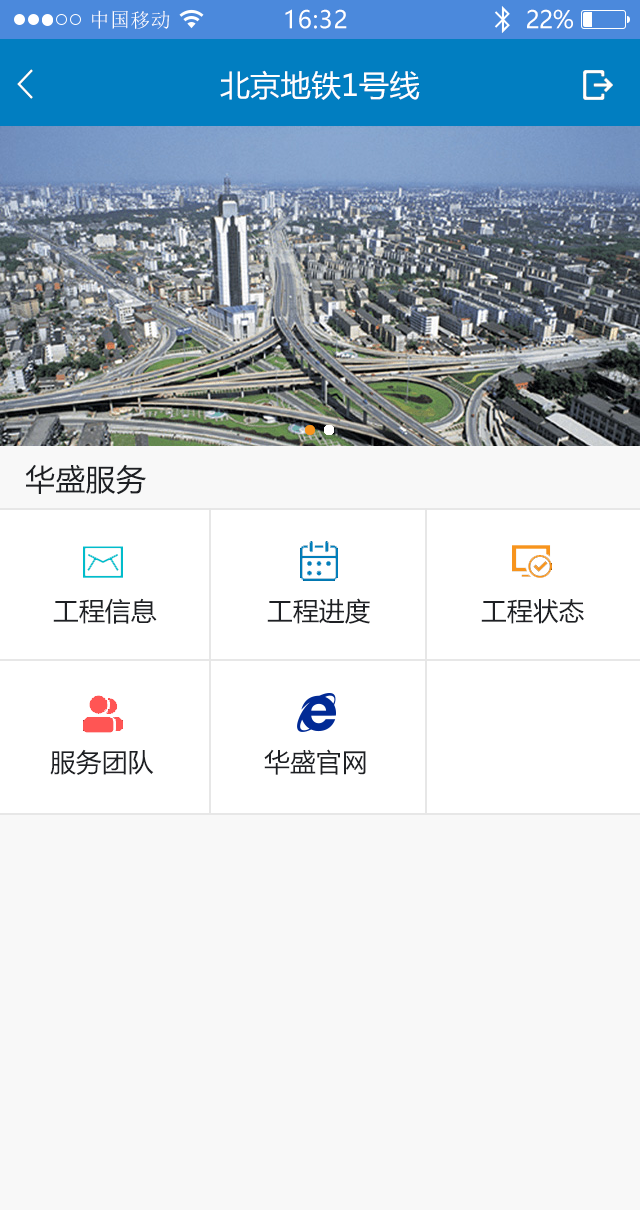
<style>
.page{position:relative;width:640px;height:1210px;background:#f8f8f8}
.page>*{position:absolute;margin:0}
.t1{font:20px "SimSun";letter-spacing:0.02em;color:#ffffff}
.t2{font:24px "MicrosoftYaHei";letter-spacing:0.025em;color:#ffffff}
.t3{font:24px "MicrosoftYaHei";letter-spacing:-0.02em;color:#ffffff}
.t4{font:30px "MicrosoftYaHei";letter-spacing:0.01em;color:#ffffff}
.t5{font:30px "MicrosoftYaHei";letter-spacing:0.01em;color:#1e2024}
.t6{font:25.7px "MicrosoftYaHei";letter-spacing:0.01em;color:#1e2024}
</style>
<div class="page">
<p class="t1" style="left:92px;top:10px;width:78px;height:19px">中国移动</p>
<p class="t2" style="left:285px;top:9px;width:62px;height:20px">16:32</p>
<p class="t3" style="left:527px;top:9px;width:46px;height:20px">22%</p>
<p class="t4" style="left:220px;top:70px;width:200px;height:30px">北京地铁1号线</p>
<p class="t5" style="left:25px;top:464px;width:121px;height:31px">华盛服务</p>
<p class="t6" style="left:53px;top:598px;width:104px;height:26px">工程信息</p>
<p class="t6" style="left:267px;top:598px;width:103px;height:26px">工程进度</p>
<p class="t6" style="left:481px;top:599px;width:103px;height:25px">工程状态</p>
<p class="t6" style="left:50px;top:749px;width:104px;height:26px">服务团队</p>
<p class="t6" style="left:264px;top:749px;width:102px;height:26px">华盛官网</p>
</div>
